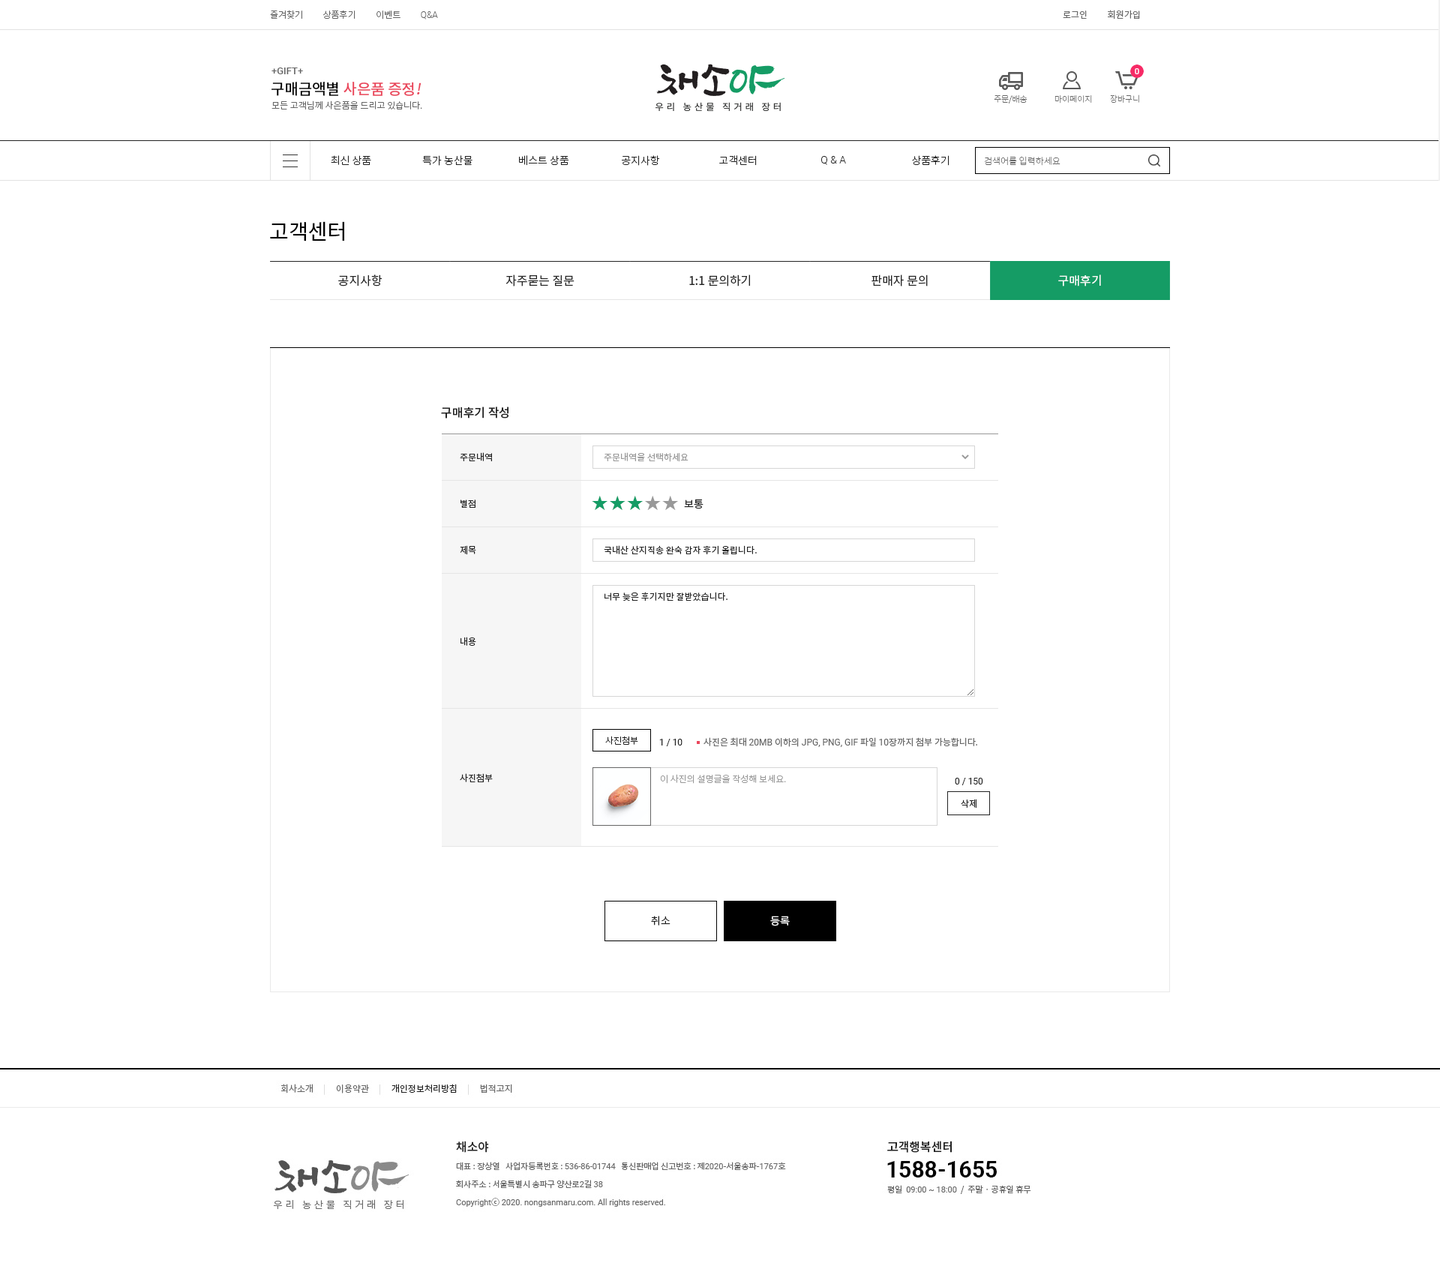
<style>
.page{position:relative;width:1440px;height:1275px;background:#ffffff}
.page>*{position:absolute;margin:0}
.t1{font:9px "NotoSansCJKkr-Light";color:#666666}
.t2{font:9px "Roboto-Light";color:#666666}
.t3{font:9px "NotoSansCJKkr-DemiLight";color:#666666}
.t4{font:9.7px "Roboto-Medium";color:#666666}
.t5{font:15px "NotoSansCJKkr-Medium";color:#ea475c}
.t6{font:15px "NotoSansCJKkr-Medium";color:#000000}
.t7{font:15px "NotoSansCJKkr-Medium";color:#ea475c;font-style:italic}
.t8{font:8.2px "NotoSansCJKkr-Thin";color:#666666}
.t9{font:10.5px "NotoSansCJKkr-Light";color:#222222}
.t10{font:10.5px "Roboto-Light";color:#222222}
.t11{font:9px "NotoSansCJKkr-Thin";color:#666666}
.t12{font:21px "NotoSansCJKkr-Regular";color:#000000}
.t13{font:12px "NotoSansCJKkr-Regular";color:#222222}
.t14{font:12px "NotoSansCJKkr-Regular";color:#ffffff}
.t15{font:12px "NotoSansCJKkr-Medium";color:#222222}
.t16{font:9px "NotoSansCJKkr-Regular";color:#222222}
.t17{font:9px "NotoSansCJKkr-Regular";color:#999999}
.t18{font:18.7px "NanumGothicLight";color:#159c65}
.t19{font:18.7px "NanumGothicLight";color:#999999}
.t20{font:10.5px "NotoSansCJKkr-Regular";color:#222222}
.t21{font:9px "NotoSansCJKkr-Light";color:#222222}
.t22{font:9px "Roboto-Regular";color:#666666}
.t23{font:9px "NotoSansCJKkr-Regular";color:#666666}
.t24{font:9px "Roboto-Regular";color:#222222}
.t25{font:9px "NotoSansCJKkr-Light";color:#999999}
.t26{font:10.5px "NotoSansCJKkr-DemiLight";color:#222222}
.t27{font:10.5px "NotoSansCJKkr-DemiLight";color:#ffffff}
</style>
<div class="page">
<p class="t1" style="left:270px;top:10px;width:168px;height:9px">즐겨찾기          상품후기          이벤트          <span class="t2">Q&amp;A</span></p>
<p class="t3" style="left:1063px;top:10px;width:77px;height:9px">로그인          회원가입</p>
<p class="t4" style="left:271px;top:67px;width:32px;height:7px">+GIFT+</p>
<p class="t5" style="left:271px;top:82px;width:150px;height:14px"><span class="t6">구매금액별 </span>사은품 증정<span class="t7">!</span></p>
<p class="t1" style="left:271px;top:100px;width:151px;height:9px">모든 고객님께 사은품을 드리고 있습니다.</p>
<p class="t8" style="left:994px;top:94px;width:33px;height:9px">주문/배송</p>
<p class="t8" style="left:1054px;top:95px;width:38px;height:8px">마이페이지</p>
<p class="t8" style="left:1110px;top:94px;width:29px;height:9px">장바구니</p>
<p class="t9" style="left:331px;top:155px;width:40px;height:10px">최신 상품</p>
<p class="t9" style="left:422px;top:155px;width:50px;height:11px">특가 농산물</p>
<p class="t9" style="left:519px;top:155px;width:50px;height:11px">베스트 상품</p>
<p class="t9" style="left:622px;top:155px;width:38px;height:11px">공지사항</p>
<p class="t9" style="left:719px;top:155px;width:38px;height:11px">고객센터</p>
<p class="t10" style="left:821px;top:156px;width:25px;height:9px">Q &amp; A</p>
<p class="t9" style="left:912px;top:155px;width:37px;height:11px">상품후기</p>
<p class="t11" style="left:984px;top:156px;width:76px;height:10px">검색어를 입력하세요</p>
<p class="t12" style="left:270px;top:221px;width:74px;height:20px">고객센터</p>
<p class="t13" style="left:338px;top:274px;width:44px;height:12px">공지사항</p>
<p class="t13" style="left:505px;top:274px;width:69px;height:12px">자주묻는 질문</p>
<p class="t13" style="left:689px;top:274px;width:61px;height:12px">1:1 문의하기</p>
<p class="t13" style="left:871px;top:274px;width:57px;height:12px">판매자 문의</p>
<p class="t14" style="left:1058px;top:274px;width:43px;height:12px">구매후기</p>
<p class="t15" style="left:441px;top:406px;width:67px;height:12px">구매후기 작성</p>
<p class="t16" style="left:460px;top:452px;width:32px;height:9px">주문내역</p>
<p class="t17" style="left:604px;top:452px;width:84px;height:10px">주문내역을 선택하세요</p>
<p class="t18" style="left:592px;top:496px;width:86px;height:14px">★★★<span class="t19">★★</span></p>
<p class="t16" style="left:460px;top:499px;width:15px;height:9px">별점</p>
<p class="t20" style="left:684px;top:499px;width:19px;height:10px">보통</p>
<p class="t16" style="left:460px;top:545px;width:16px;height:10px">제목</p>
<p class="t16" style="left:604px;top:545px;width:153px;height:9px">국내산 산지직송 완숙 감자 후기 올립니다.</p>
<p class="t16" style="left:604px;top:592px;width:123px;height:9px">너무 늦은 후기지만 잘받았습니다.</p>
<p class="t16" style="left:460px;top:637px;width:16px;height:9px">내용</p>
<p class="t21" style="left:605px;top:736px;width:33px;height:9px">사진첨부</p>
<p class="t22" style="left:703px;top:737px;width:274px;height:10px"><span class="t23">사진은 최대 </span>20MB <span class="t23">이하의 </span>JPG, PNG, GIF<span class="t23"> 파일 </span>10<span class="t23">장까지 첨부 가능합니다.</span></p>
<p class="t24" style="left:659px;top:739px;width:23px;height:7px">1 / 10</p>
<p class="t16" style="left:460px;top:773px;width:33px;height:9px">사진첨부</p>
<p class="t25" style="left:660px;top:774px;width:126px;height:10px">이 사진의 설명글을 작성해 보세요.</p>
<p class="t24" style="left:955px;top:778px;width:28px;height:7px">0 / 150</p>
<p class="t16" style="left:961px;top:799px;width:15px;height:9px">삭제</p>
<p class="t26" style="left:651px;top:916px;width:19px;height:9px">취소</p>
<p class="t27" style="left:770px;top:916px;width:20px;height:10px">등록</p>
</div>
